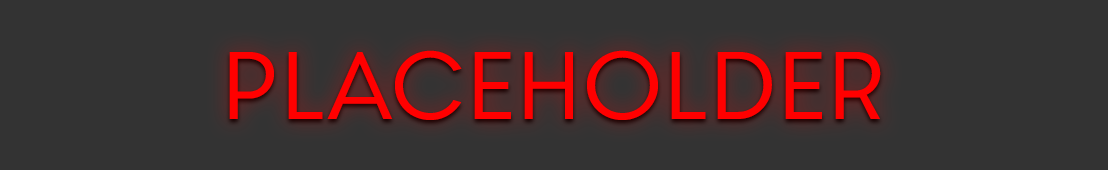
<style>
.page{position:relative;width:1108px;height:170px;background:#333333}
.page>*{position:absolute;margin:0}
.t1{font:100px "2030-Regular";color:#ff0000}
</style>
<div class="page">
<p class="t1" style="left:229px;top:50px;width:652px;height:70px">PLACEHOLDER</p>
</div>
